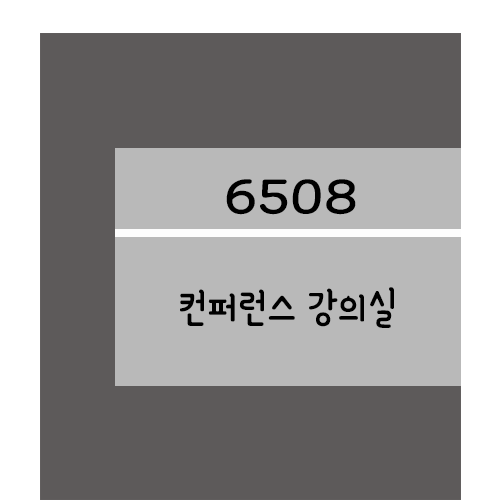
<style>
.page{position:relative;width:500px;height:500px;background:#5d5a5a}
.page>*{position:absolute;margin:0}
.t1{font:61.2px "YanoljaYacheR";color:#000000;scale:1.18 1}
.t2{font:48px "YanoljaYacheR";color:#000000}
</style>
<div class="page">
<p class="t1" style="left:226px;top:179px;width:130px;height:36px">6508</p>
<p class="t2" style="left:180px;top:287px;width:214px;height:41px">컨퍼런스 강의실</p>
</div>
